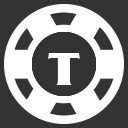
<style>
.page{position:relative;width:128px;height:128px;background:#333333}
.page>*{position:absolute;margin:0}
.t1{font:48px "Serpentine-Bold";letter-spacing:0.1em;color:#ffffff}
</style>
<div class="page">
<p class="t1" style="left:48px;top:53px;width:32px;height:32px">T</p>
</div>
